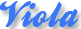
<style>
.page{position:relative;width:81px;height:29px;background:#3878f4}
.page>*{position:absolute;margin:0}
.t1{font:36px "BallparkWeiner";letter-spacing:0.03em;color:#3878f4}
</style>
<div class="page">
<p class="t1" style="left:0px;top:1px;width:78px;height:26px">Viola</p>
</div>
